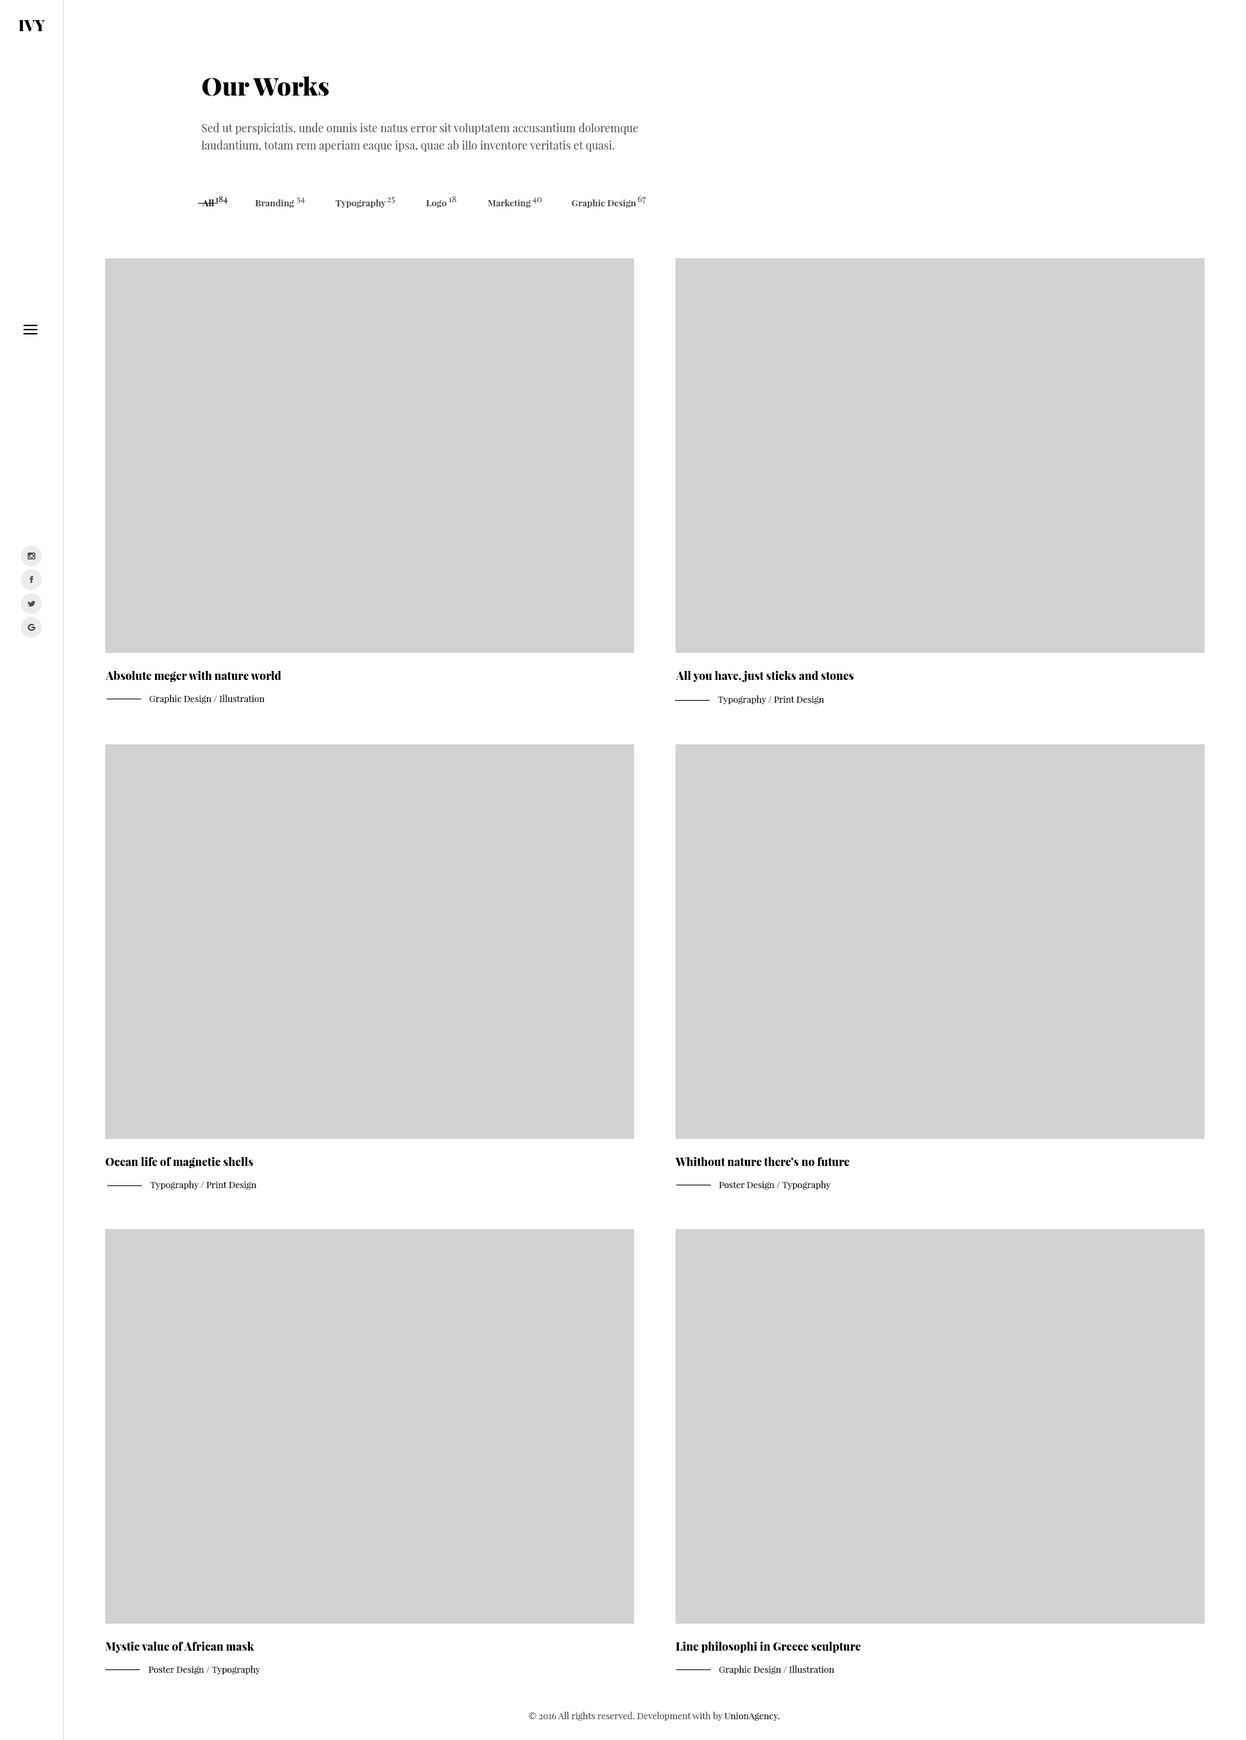
<style>
.page{position:relative;width:1246px;height:1740px;background:#d2d2d2}
.page>*{position:absolute;margin:0}
.t1{font:15.2px "PlayfairDisplay-Black";color:#000000}
.t2{font:24.9px "PlayfairDisplay-Black";color:#000000}
.t3{font:11.1px/17.3px "PlayfairDisplay-Regular";color:#494949}
.t4{font:8.8px "PlayfairDisplay-Regular";color:#000000}
.t5{font:8.8px "PlayfairDisplay-Regular";color:#494949}
.t6{font:8.8px "PlayfairDisplay-Bold";color:#000000}
.t7{font:8.8px "PlayfairDisplay-Bold";color:#494949}
.t8{font:11.1px "PlayfairDisplay-Black";color:#000000}
.t9{font:9px "PlayfairDisplay-Regular";color:#000000}
.t10{font:9px "PlayfairDisplay-Regular";color:#010101}
.t11{font:9px "PlayfairDisplay-Regular";color:#494949}
</style>
<div class="page">
<p class="t1" style="left:19px;top:20px;width:26px;height:11px">IVY</p>
<p class="t2" style="left:202px;top:76px;width:127px;height:20px">Our Works</p>
<p class="t3" style="left:201px;top:123px;width:437px;height:29px">Sed ut perspiciatis, unde omnis iste natus error sit voluptatem accusantium doloremque laudantium, totam rem aperiam eaque ipsa, quae ab illo inventore veritatis et quasi.</p>
<p class="t4" style="left:215px;top:196px;width:13px;height:8px">184</p>
<p class="t5" style="left:296px;top:197px;width:9px;height:7px">34</p>
<p class="t5" style="left:387px;top:197px;width:8px;height:7px">25</p>
<p class="t5" style="left:449px;top:196px;width:7px;height:6px">18</p>
<p class="t5" style="left:532px;top:197px;width:10px;height:7px">40</p>
<p class="t5" style="left:638px;top:195px;width:8px;height:9px">67</p>
<p class="t6" style="left:202px;top:199px;width:12px;height:7px">All</p>
<p class="t7" style="left:255px;top:199px;width:39px;height:9px">Branding</p>
<p class="t7" style="left:335px;top:199px;width:51px;height:9px">Typography</p>
<p class="t7" style="left:426px;top:200px;width:21px;height:8px">Logo</p>
<p class="t7" style="left:488px;top:199px;width:43px;height:9px">Marketing</p>
<p class="t7" style="left:572px;top:199px;width:64px;height:9px">Graphic Design</p>
<p class="t8" style="left:105px;top:671px;width:176px;height:11px">Absolute meger with nature world</p>
<p class="t8" style="left:676px;top:671px;width:178px;height:11px">All you have, just sticks and stones</p>
<p class="t9" style="left:150px;top:694px;width:115px;height:9px">Graphic Design / Illustration</p>
<p class="t9" style="left:718px;top:695px;width:107px;height:9px">Typography / Print Design</p>
<p class="t8" style="left:105px;top:1157px;width:148px;height:11px">Ocean life of magnetic shells</p>
<p class="t8" style="left:675px;top:1157px;width:174px;height:9px">Whithout nature there’s no future</p>
<p class="t9" style="left:150px;top:1180px;width:107px;height:9px">Typography / Print Design</p>
<p class="t10" style="left:719px;top:1180px;width:112px;height:9px">Poster Design / Typography</p>
<p class="t8" style="left:105px;top:1641px;width:149px;height:12px">Mystic value of African mask</p>
<p class="t8" style="left:676px;top:1641px;width:185px;height:12px">Line philosophi in Greece sculpture</p>
<p class="t9" style="left:148px;top:1665px;width:112px;height:9px">Poster Design / Typography</p>
<p class="t9" style="left:719px;top:1665px;width:116px;height:9px">Graphic Design / Illustration</p>
<p class="t11" style="left:528px;top:1711px;width:252px;height:9px">© 2016 All rights reserved. Development with by <span class="t9">UnionAgency.</span></p>
</div>
